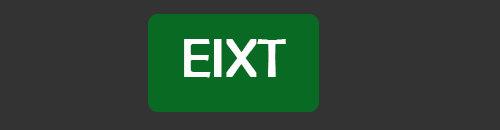
<style>
.page{position:relative;width:500px;height:130px;background:#333333}
.page>*{position:absolute;margin:0}
.t1{font:56.1px "BerlinSansFB-Reg";color:#fdfdfd}
</style>
<div class="page">
<p class="t1" style="left:184px;top:39px;width:102px;height:39px">EIXT</p>
</div>
